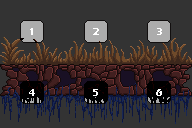
<style>
.page{position:relative;width:192px;height:128px;background:#333333}
.page>*{position:absolute;margin:0}
.t1{font:10px "ErasITC-Bold";letter-spacing:0.02em;color:#ffffff}
</style>
<div class="page">
<p class="t1" style="left:30px;top:28px;width:3px;height:7px">1</p>
<p class="t1" style="left:93px;top:28px;width:6px;height:7px">2</p>
<p class="t1" style="left:157px;top:28px;width:5px;height:7px">3</p>
<p class="t1" style="left:29px;top:89px;width:6px;height:7px">4</p>
<p class="t1" style="left:93px;top:89px;width:5px;height:7px">5</p>
<p class="t1" style="left:156px;top:89px;width:6px;height:7px">6</p>
</div>
